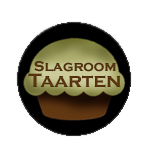
<style>
.page{position:relative;width:150px;height:150px;background:#ffffff}
.page>*{position:absolute;margin:0}
.t1{font:14.7px "CopperplateGothic-Bold";color:#623812}
.t2{font:20px "CopperplateGothic-Bold";color:#623812}
</style>
<div class="page">
<p class="t1" style="left:34px;top:61px;width:82px;height:11px">Slagroom</p>
<p class="t2" style="left:28px;top:73px;width:93px;height:15px">Taarten</p>
</div>
